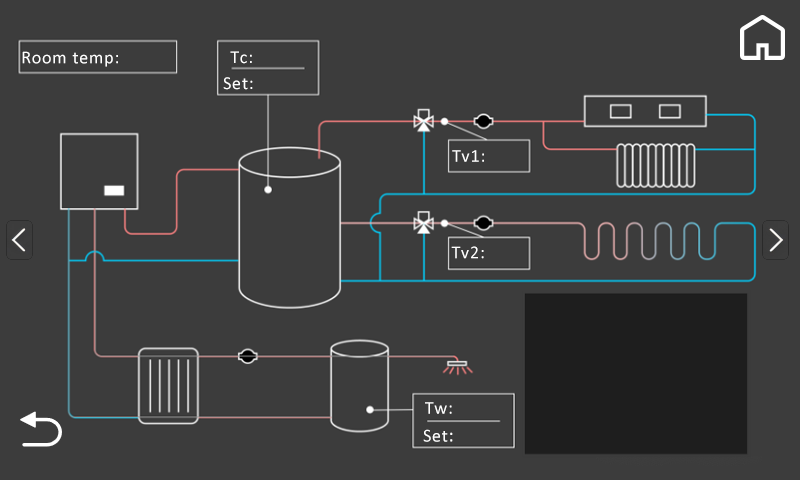
<style>
.page{position:relative;width:800px;height:480px;background:#3c3c3c}
.page>*{position:absolute;margin:0}
.t1{font:18px "Calibri";letter-spacing:0.045em;color:#ffffff}
.t2{font:19px "Calibri";letter-spacing:0.045em;color:#ffffff}
</style>
<div class="page">
<p class="t1" style="left:22px;top:51px;width:96px;height:16px">Room temp:</p>
<p class="t1" style="left:230px;top:51px;width:22px;height:13px">Tc:</p>
<p class="t1" style="left:223px;top:77px;width:30px;height:13px">Set:</p>
<p class="t1" style="left:452px;top:150px;width:32px;height:12px">Tv1:</p>
<p class="t1" style="left:451px;top:246px;width:33px;height:13px">Tv2:</p>
<p class="t1" style="left:425px;top:402px;width:27px;height:12px">Tw:</p>
<p class="t1" style="left:423px;top:429px;width:30px;height:13px">Set<span class="t2">:</span></p>
</div>
